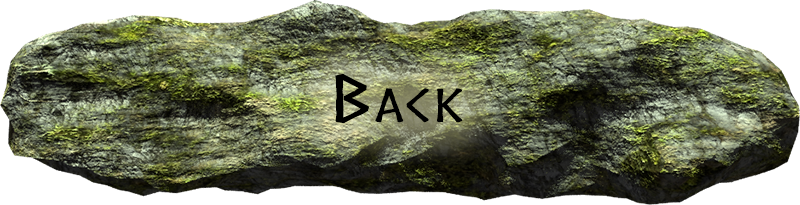
<style>
.page{position:relative;width:800px;height:205px}
.page>*{position:absolute;margin:0}
.t1{font:61.2px "Norse";color:#000000;font-variant:small-caps;font-weight:bold;scale:1.76 1}
</style>
<div class="page">
<p class="t1" style="left:335px;top:74px;width:128px;height:50px">Back</p>
</div>
